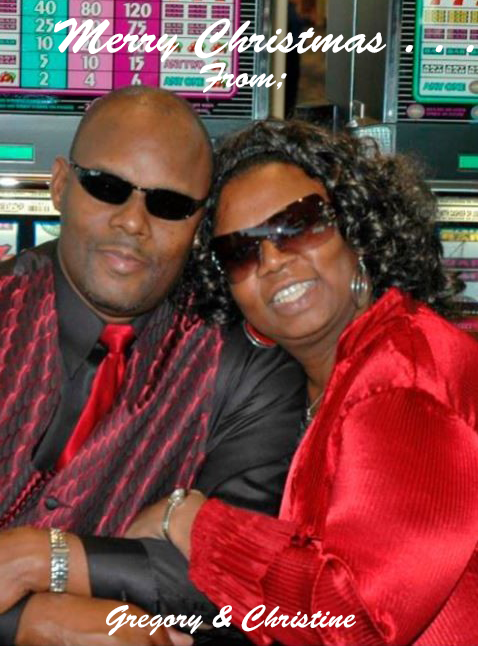
<style>
.page{position:relative;width:478px;height:646px}
.page>*{position:absolute;margin:0}
.t1{font:48px "BrushScriptStd";color:#ffffff}
.t2{font:36px "BrushScriptStd";color:#ffffff}
.t3{font:32px "BrushScriptStd";color:#ffffff}
</style>
<div class="page">
<p class="t1" style="left:54px;top:18px;width:420px;height:45px">Merry Christmas . . .</p>
<p class="t2" style="left:199px;top:62px;width:88px;height:31px">From;</p>
<p class="t3" style="left:106px;top:604px;width:250px;height:32px">Gregory &amp; Christine</p>
</div>
